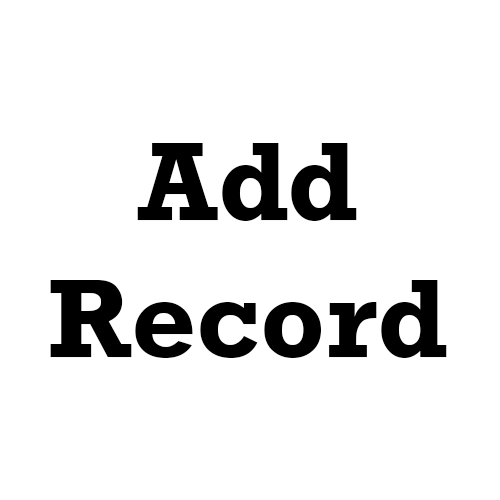
<style>
.page{position:relative;width:500px;height:500px;background:#ffffff}
.page>*{position:absolute;margin:0}
.t1{font:114px "Rockwell-Bold";color:#000000}
</style>
<div class="page">
<p class="t1" style="left:50px;top:143px;width:397px;height:215px;text-align:center">Add<br>Record</p>
</div>
